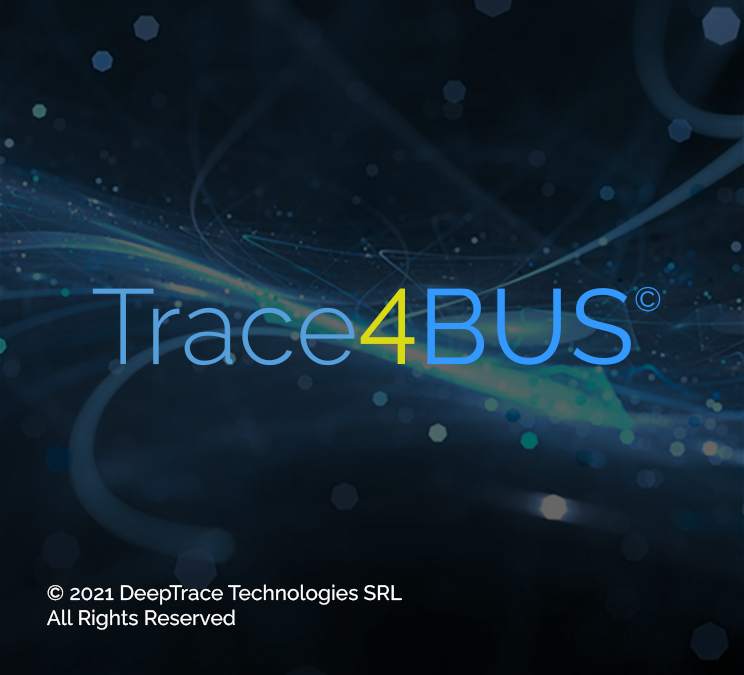
<style>
.page{position:relative;width:744px;height:675px}
.page>*{position:absolute;margin:0}
.t1{font:106.3px "Raleway-Light";color:#559fdc}
.t2{font:106.3px "Raleway-Regular";color:#d9da13}
.t3{font:106.3px "Raleway-Regular";color:#3399ff}
.t4{font:33.6px "Raleway-Light";color:#3399ff}
.t5{font:20.8px "Raleway-Medium";color:#ffffff}
</style>
<div class="page">
<p class="t1" style="left:92px;top:288px;width:539px;height:78px">Trace<span class="t2">4</span><span class="t3">BUS</span></p>
<p class="t4" style="left:635px;top:286px;width:26px;height:26px">©</p>
<p class="t5" style="left:47px;top:584px;width:355px;height:46px">© 2021 DeepTrace Technologies SRL<br>All Rights Reserved</p>
</div>
